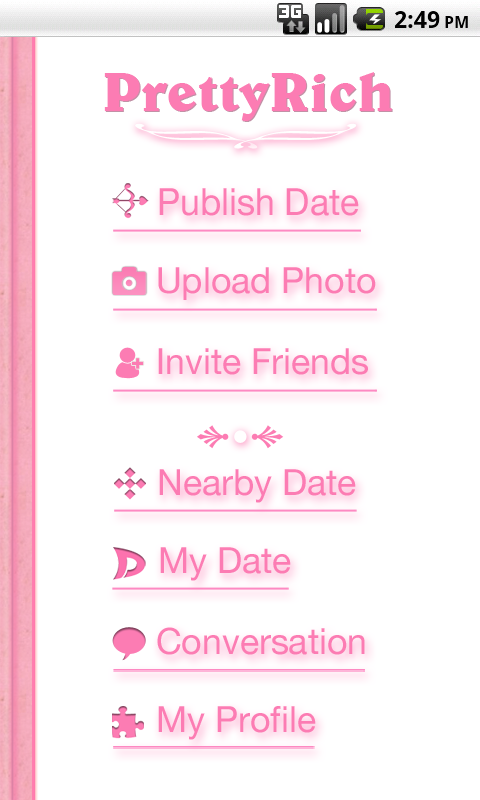
<style>
.page{position:relative;width:480px;height:800px;background:#ffffff}
.page>*{position:absolute;margin:0}
.t1{font:55.9px "BelweBT-Bold";color:#fc7cb3}
.t2{font:37.4px "HelveticaNeue";color:#fc7cb3;scale:0.95 1}
.t3{font:36px "HelveticaNeue";color:#fc7cb3}
</style>
<div class="page">
<p class="t1" style="left:104px;top:72px;width:288px;height:49px">PrettyRich</p>
<p class="t2" style="left:159px;top:188px;width:200px;height:28px">Publish Date</p>
<p class="t3" style="left:158px;top:267px;width:218px;height:33px">Upload Photo</p>
<p class="t3" style="left:158px;top:348px;width:210px;height:27px">Invite Friends</p>
<p class="t3" style="left:159px;top:469px;width:197px;height:34px">Nearby Date</p>
<p class="t3" style="left:160px;top:547px;width:131px;height:34px">My Date</p>
<p class="t3" style="left:157px;top:627px;width:208px;height:28px">Conversation</p>
<p class="t3" style="left:158px;top:706px;width:158px;height:34px">My Profile</p>
</div>
